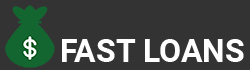
<style>
.page{position:relative;width:250px;height:70px;background:#333333}
.page>*{position:absolute;margin:0}
.t1{font:32.1px "Roboto-Bold";color:#ffffff}
</style>
<div class="page">
<p class="t1" style="left:62px;top:39px;width:182px;height:23px">FAST LOANS</p>
</div>
